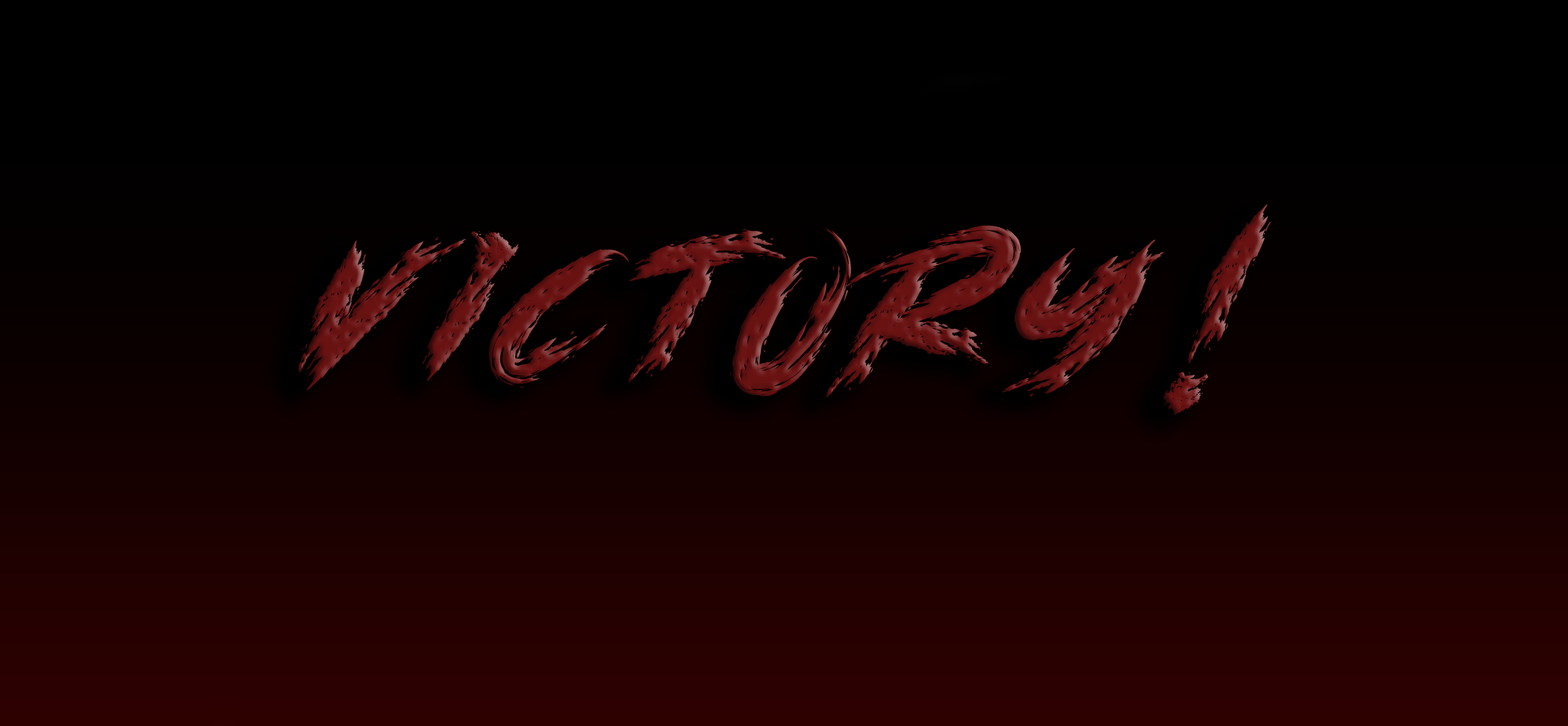
<style>
.page{position:relative;width:1568px;height:726px}
.page>*{position:absolute;margin:0}
.t1{font:224px "DANGERZONE";color:#691212}
</style>
<div class="page">
<p class="t1" style="left:298px;top:204px;width:973px;height:210px">Victory!</p>
</div>
